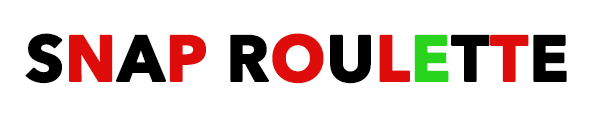
<style>
.page{position:relative;width:600px;height:120px;background:#ffffff}
.page>*{position:absolute;margin:0}
.t1{font:64px "AvenirNext-Bold";color:#000000;font-weight:bold}
.t2{font:64px "AvenirNext-Bold";color:#df0c0c;font-weight:bold}
.t3{font:64px "AvenirNext-Bold";color:#29d51c;font-weight:bold}
</style>
<div class="page">
<p class="t1" style="left:25px;top:33px;width:542px;height:51px">S<span class="t2">N</span>A<span class="t2">P </span>R<span class="t2">O</span>U<span class="t2">L</span><span class="t3">E</span>T<span class="t2">T</span>E</p>
</div>
